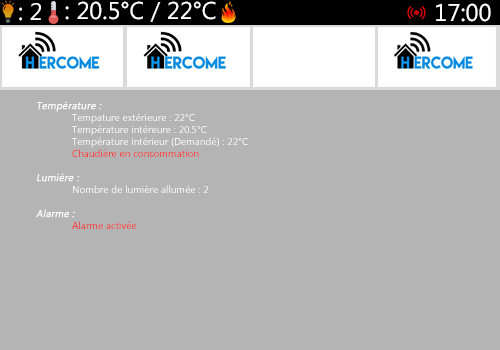
<style>
.page{position:relative;width:500px;height:350px;background:#b4b4b4}
.page>*{position:absolute;margin:0}
.t1{font:24px "MicrosoftTaiLe";color:#ffffff}
.t2{font:24.3px "MicrosoftTaiLe";color:#ffffff}
.t3{font:10px "MicrosoftTaiLe";color:#ffffff}
.t4{font:10px "MicrosoftTaiLe";color:#ffffff;font-weight:bold;font-style:italic}
.t5{font:10px "MicrosoftTaiLe";color:#ff0000}
</style>
<div class="page">
<p class="t1" style="left:19px;top:3px;width:22px;height:18px">: 2</p>
<p class="t2" style="left:65px;top:1px;width:151px;height:21px">: 20.5°C / 22°C</p>
<p class="t2" style="left:436px;top:3px;width:55px;height:19px">17:00</p>
<p class="t3" style="left:36px;top:101px;width:212px;height:128px"><span class="t4">Température :<br></span>     Tempature extérieure : 22°C<br>     Température intéreure : 20.5°C<br>     Température intérieur (Demandé) : 22°C<br> <span class="t5"> Chaudière en consommation<br><br> </span><span class="t4">Lumière :<br></span>  Nombre de lumière allumée : 2<br><br> <span class="t4">Alarme :<br></span><span class="t5">  Alarme activée</span></p>
</div>
